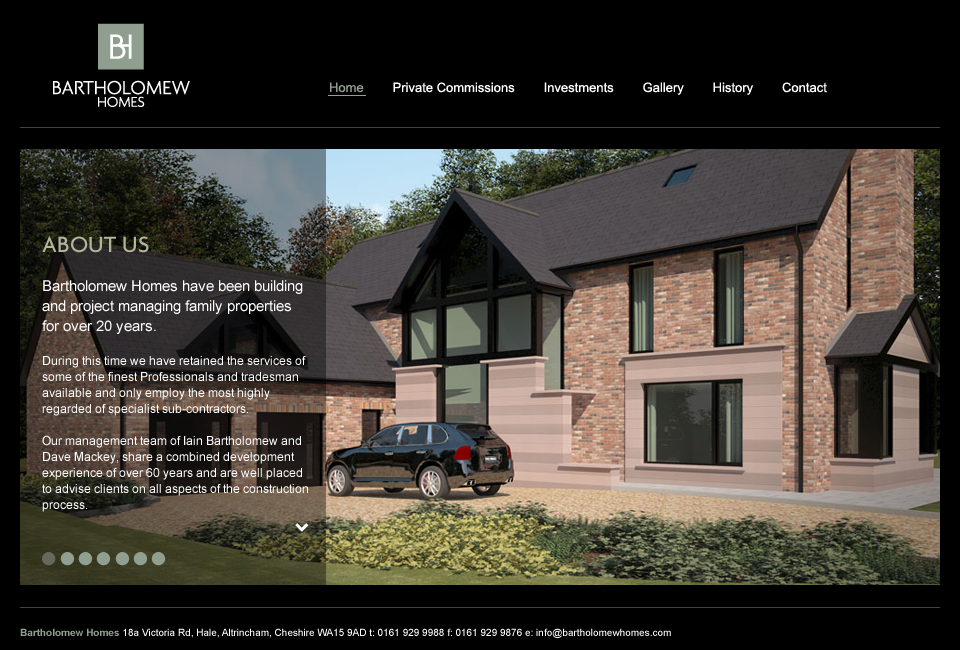
<style>
.page{position:relative;width:960px;height:650px;background:#000000}
.page>*{position:absolute;margin:0}
.t1{font:13px "ArialMT";color:#ffffff}
.t2{font:13px "ArialMT";color:#909f8f}
.t3{font:12.6px/16px "ArialMT";color:#ffffff;scale:0.96 1}
.t4{font:24px/11px "Agenda-Medium";color:#b3b699}
.t5{font:15px/12px "ArialMT";color:#ffffff}
.t6{font:15px/20px "ArialMT";color:#ffffff}
.t7{font:15px "ArialMT";color:#ffffff}
.t8{font:10px "ArialMT";color:#ffffff}
.t9{font:10px "Arial-BoldMT";color:#909f8f}
</style>
<div class="page">
<p class="t1" style="left:330px;top:82px;width:497px;height:13px"><span class="t2">Home</span>        Private Commissions        Investments        Gallery        History        Contact</p>
<p class="t3" style="left:42px;top:236px;width:266px;height:276px"><span class="t4">ABOUT US<br><br></span><span class="t5">Bartholomew Homes have been building </span><span class="t6">and project managing family properties for over 20 years.<br></span><span class="t7"><br></span>During this time we have retained the services of some of the finest Professionals and tradesman available and only employ the most highly<br>regarded of specialist sub-contractors. <br><br>Our management team of Iain Bartholomew and Dave Mackey, share a combined development experience of over 60 years and are well placed <br>to advise clients on all aspects of the construction process.<br><br><br>We restrict the number of building contracts at any one time, meaning <br>we are readily available on a daily basis to anticipate <br>decisions and provoke discussion.<br><br>By employing this approach we maximize all opportunities during the <br>Construction phase and give clients ample lead time and information<br>for the decision making process.</p>
<p class="t8" style="left:20px;top:628px;width:651px;height:10px"><span class="t9">Bartholomew Homes</span>18a Victoria Rd, Hale, Altrincham, Cheshire WA15 9AD t: 0161 929 9988 f: 0161 929 9876 e: info@bartholomewhomes.com</p>
</div>
